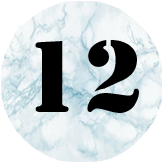
<style>
.page{position:relative;width:164px;height:164px;background:#ffffff}
.page>*{position:absolute;margin:0}
.t1{font:95.5px "StencilStd";color:#000000}
</style>
<div class="page">
<p class="t1" style="left:35px;top:40px;width:104px;height:73px">12</p>
</div>
